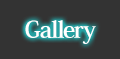
<style>
.page{position:relative;width:120px;height:59px;background:#333333}
.page>*{position:absolute;margin:0}
.t1{font:24px "HeiseiMinStd-W7";letter-spacing:-0.04em;color:#fffef9}
</style>
<div class="page">
<p class="t1" style="left:25px;top:20px;width:71px;height:24px">Gallery</p>
</div>
